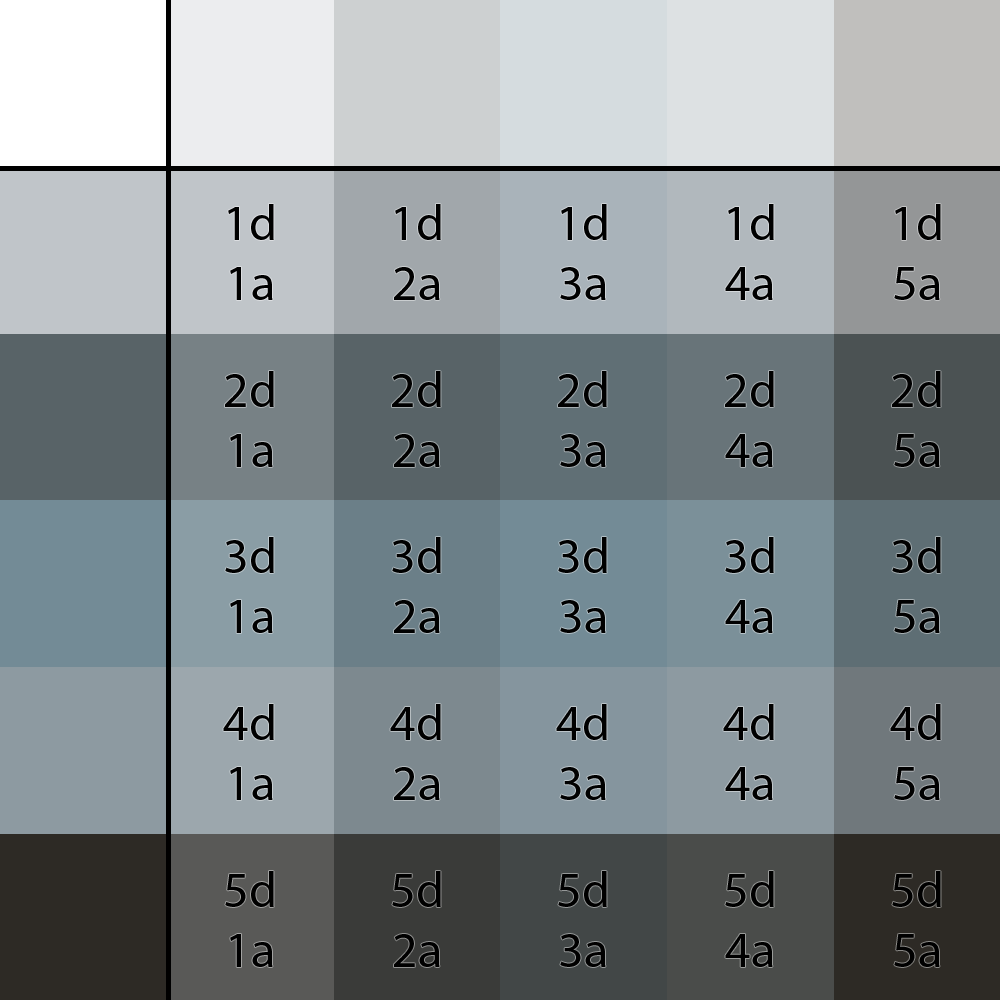
<style>
.page{position:relative;width:1000px;height:1000px}
.page>*{position:absolute;margin:0}
.t1{font:12px "MyriadPro-Regular";color:#000000}
</style>
<div class="page">
<p class="t1" style="left:228px;top:204px;width:46px;height:96px;text-align:center">1d<br>1a</p>
<p class="t1" style="left:394px;top:204px;width:47px;height:96px;text-align:center">1d<br>2a</p>
<p class="t1" style="left:560px;top:204px;width:47px;height:96px;text-align:center">1d<br>3a</p>
<p class="t1" style="left:725px;top:204px;width:49px;height:96px;text-align:center">1d<br>4a</p>
<p class="t1" style="left:894px;top:204px;width:47px;height:96px;text-align:center">1d<br>5a</p>
<p class="t1" style="left:225px;top:371px;width:49px;height:96px;text-align:center">2d<br>1a</p>
<p class="t1" style="left:392px;top:371px;width:49px;height:96px;text-align:center">2d<br>2a</p>
<p class="t1" style="left:558px;top:371px;width:49px;height:96px;text-align:center">2d<br>3a</p>
<p class="t1" style="left:725px;top:371px;width:49px;height:96px;text-align:center">2d<br>4a</p>
<p class="t1" style="left:892px;top:371px;width:49px;height:96px;text-align:center">2d<br>5a</p>
<p class="t1" style="left:225px;top:537px;width:49px;height:96px;text-align:center">3d<br>1a</p>
<p class="t1" style="left:392px;top:537px;width:49px;height:96px;text-align:center">3d<br>2a</p>
<p class="t1" style="left:558px;top:537px;width:49px;height:96px;text-align:center">3d<br>3a</p>
<p class="t1" style="left:725px;top:537px;width:49px;height:96px;text-align:center">3d<br>4a</p>
<p class="t1" style="left:892px;top:537px;width:49px;height:96px;text-align:center">3d<br>5a</p>
<p class="t1" style="left:223px;top:704px;width:51px;height:96px;text-align:center">4d<br>1a</p>
<p class="t1" style="left:390px;top:704px;width:51px;height:96px;text-align:center">4d<br>2a</p>
<p class="t1" style="left:556px;top:704px;width:51px;height:96px;text-align:center">4d<br>3a</p>
<p class="t1" style="left:723px;top:704px;width:51px;height:96px;text-align:center">4d<br>4a</p>
<p class="t1" style="left:890px;top:704px;width:51px;height:96px;text-align:center">4d<br>5a</p>
<p class="t1" style="left:225px;top:871px;width:49px;height:96px;text-align:center">5d<br>1a</p>
<p class="t1" style="left:392px;top:871px;width:49px;height:96px;text-align:center">5d<br>2a</p>
<p class="t1" style="left:558px;top:871px;width:49px;height:96px;text-align:center">5d<br>3a</p>
<p class="t1" style="left:725px;top:871px;width:49px;height:96px;text-align:center">5d<br>4a</p>
<p class="t1" style="left:892px;top:871px;width:49px;height:96px;text-align:center">5d<br>5a</p>
</div>
